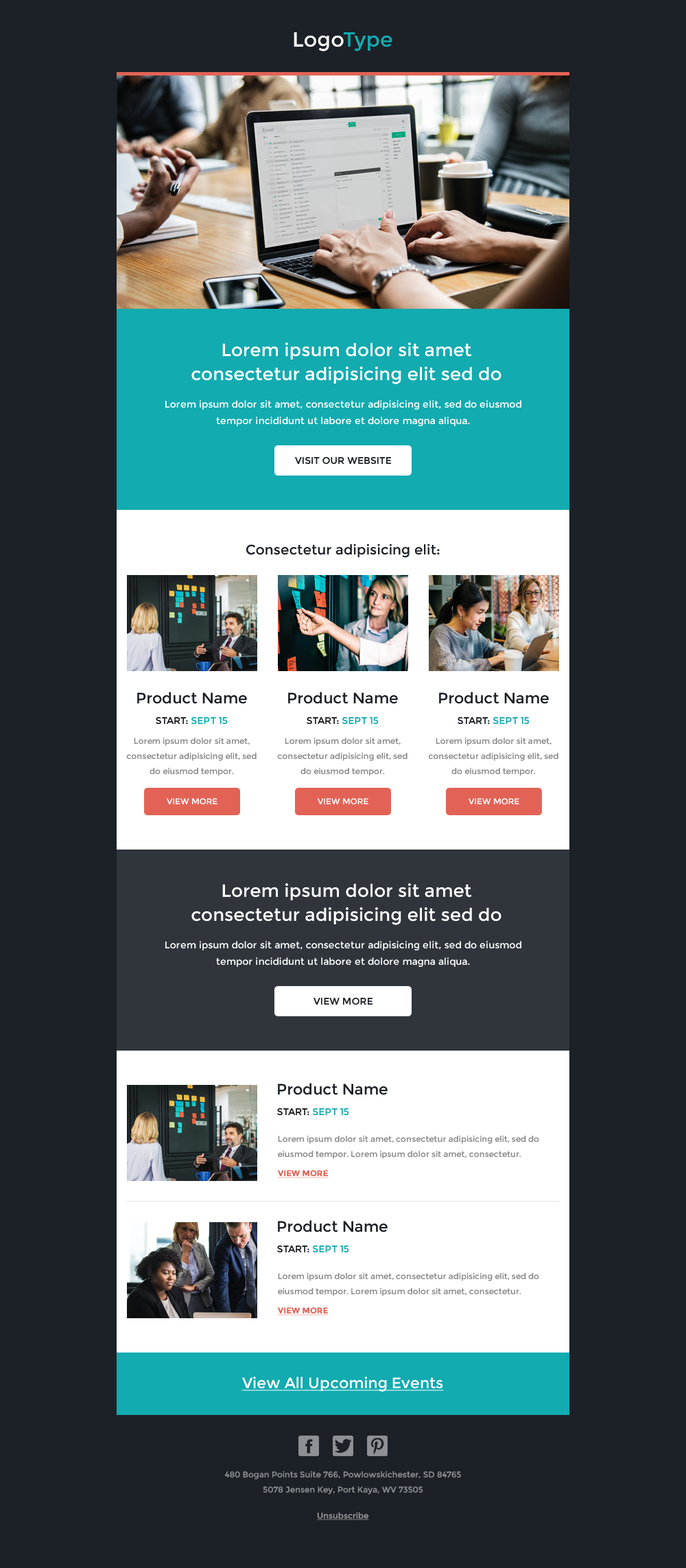
<style>
.page{position:relative;width:686px;height:1568px;background:#1c2127}
.page>*{position:absolute;margin:0}
.t1{font:20.6px "Montserrat-Regular";letter-spacing:0.005em;color:#ffffff}
.t2{font:20.6px "Montserrat-Regular";letter-spacing:0.005em;color:#11abb0}
.t3{font:17.8px/24px "Montserrat-Regular";letter-spacing:0.005em;color:#ffffff}
.t4{font:9.6px/16.5px "Montserrat-Regular";letter-spacing:0.005em;color:#ffffff}
.t5{font:9.6px "Montserrat-Regular";color:#1c2127;text-transform:uppercase}
.t6{font:13.7px "Montserrat-Regular";letter-spacing:0.005em;color:#1c2127}
.t7{font:15.1px "Montserrat-Regular";letter-spacing:0.005em;color:#1c2127}
.t8{font:9.6px "Montserrat-Regular";letter-spacing:0.005em;color:#11abb0}
.t9{font:9.6px "Montserrat-Regular";letter-spacing:0.005em;color:#1c2127}
.t10{font:8.2px/15.1px "Montserrat-Regular";letter-spacing:0.005em;color:#878787}
.t11{font:8.2px "Montserrat-Regular";color:#ffffff;text-transform:uppercase}
.t12{font:8.2px "Montserrat-Bold";color:#e26356;text-transform:uppercase;text-decoration:underline}
.t13{font:15.1px "Montserrat-Regular";letter-spacing:0.005em;color:#ffffff;text-decoration:underline}
.t14{font:8.2px/15.1px "Montserrat-Regular";color:#8e9093}
.t15{font:8.2px "Montserrat-Regular";color:#999999;text-decoration:underline}
</style>
<div class="page">
<p class="t1" style="left:294px;top:32px;width:99px;height:19px">Logo<span class="t2">Type</span></p>
<p class="t3" style="left:191px;top:342px;width:311px;height:42px;text-align:center">Lorem ipsum dolor sit amet consectetur adipisicing elit sed do eiusmod</p>
<p class="t4" style="left:165px;top:400px;width:357px;height:26px;text-align:center">Lorem ipsum dolor sit amet, consectetur adipisicing elit, sed do eiusmod tempor incididunt ut labore et dolore magna aliqua.</p>
<p class="t5" style="left:295px;top:457px;width:96px;height:8px">VISIT OUR WEBSITE</p>
<p class="t6" style="left:246px;top:543px;width:194px;height:15px">Consectetur adipisicing elit:</p>
<p class="t7" style="left:137px;top:692px;width:110px;height:12px">Product Name</p>
<p class="t7" style="left:288px;top:692px;width:110px;height:12px">Product Name</p>
<p class="t7" style="left:439px;top:692px;width:110px;height:12px">Product Name</p>
<p class="t8" style="left:156px;top:717px;width:72px;height:8px"><span class="t9">START: </span>SEPT 15</p>
<p class="t8" style="left:307px;top:717px;width:72px;height:8px"><span class="t9">START: </span>SEPT 15</p>
<p class="t8" style="left:458px;top:717px;width:72px;height:8px"><span class="t9">START: </span>SEPT 15</p>
<p class="t10" style="left:126px;top:737px;width:131px;height:39px;text-align:center">Lorem ipsum dolor sit amet, consectetur adipisicing elit, sed do eiusmod tempor.</p>
<p class="t10" style="left:277px;top:737px;width:131px;height:39px;text-align:center">Lorem ipsum dolor sit amet, consectetur adipisicing elit, sed do eiusmod tempor.</p>
<p class="t10" style="left:428px;top:737px;width:131px;height:39px;text-align:center">Lorem ipsum dolor sit amet, consectetur adipisicing elit, sed do eiusmod tempor.</p>
<p class="t11" style="left:167px;top:798px;width:51px;height:6px">view more</p>
<p class="t11" style="left:318px;top:798px;width:50px;height:6px">view more</p>
<p class="t11" style="left:469px;top:798px;width:50px;height:6px">view more</p>
<p class="t3" style="left:191px;top:883px;width:311px;height:42px;text-align:center">Lorem ipsum dolor sit amet consectetur adipisicing elit sed do eiusmod</p>
<p class="t4" style="left:165px;top:941px;width:357px;height:26px;text-align:center">Lorem ipsum dolor sit amet, consectetur adipisicing elit, sed do eiusmod tempor incididunt ut labore et dolore magna aliqua.</p>
<p class="t5" style="left:314px;top:998px;width:59px;height:7px">view more</p>
<p class="t7" style="left:278px;top:1083px;width:110px;height:12px">Product Name</p>
<p class="t8" style="left:277px;top:1108px;width:72px;height:8px"><span class="t9">START: </span>SEPT 15</p>
<p class="t10" style="left:278px;top:1135px;width:261px;height:24px">Lorem ipsum dolor sit amet, consectetur adipisicing elit, sed do eiusmod tempor. Lorem ipsum dolor sit amet, consectetur.</p>
<p class="t12" style="left:278px;top:1170px;width:51px;height:8px">view more</p>
<p class="t7" style="left:278px;top:1220px;width:110px;height:12px">Product Name</p>
<p class="t8" style="left:277px;top:1245px;width:72px;height:8px"><span class="t9">START: </span>SEPT 15</p>
<p class="t10" style="left:278px;top:1272px;width:261px;height:24px">Lorem ipsum dolor sit amet, consectetur adipisicing elit, sed do eiusmod tempor. Lorem ipsum dolor sit amet, consectetur.</p>
<p class="t12" style="left:278px;top:1307px;width:51px;height:8px">view more</p>
<p class="t13" style="left:242px;top:1377px;width:202px;height:15px">View All Upcoming Events</p>
<p class="t14" style="left:224px;top:1471px;width:237px;height:24px;text-align:center">480 Bogan Points Suite 766, Powlowskichester, SD 84765<br>5078 Jensen Key, Port Kaya, WV 73505</p>
<p class="t15" style="left:317px;top:1512px;width:52px;height:8px">Unsubscribe</p>
</div>
